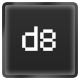
<style>
.page{position:relative;width:80px;height:80px}
.page>*{position:absolute;margin:0}
.t1{font:48px "Kenney-Pixel";color:#ffffff}
</style>
<div class="page">
<p class="t1" style="left:22px;top:26px;width:34px;height:25px">d8</p>
</div>
